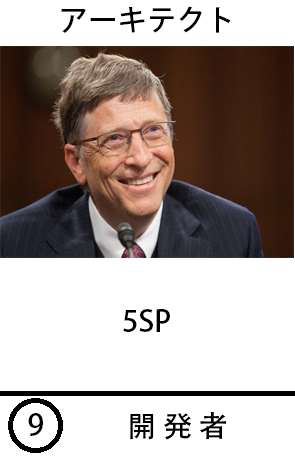
<style>
.page{position:relative;width:295px;height:460px;background:#ffffff}
.page>*{position:absolute;margin:0}
.t1{font:29.3px "AdobeHeitiStd-Regular";color:#000000}
</style>
<div class="page">
<p class="t1" style="left:61px;top:6px;width:170px;height:27px">アーキテクト</p>
<p class="t1" style="left:123px;top:309px;width:47px;height:23px">5SP</p>
<p class="t1" style="left:28px;top:413px;width:15px;height:23px">9</p>
<p class="t1" style="left:130px;top:412px;width:97px;height:28px">開 発 者</p>
</div>
